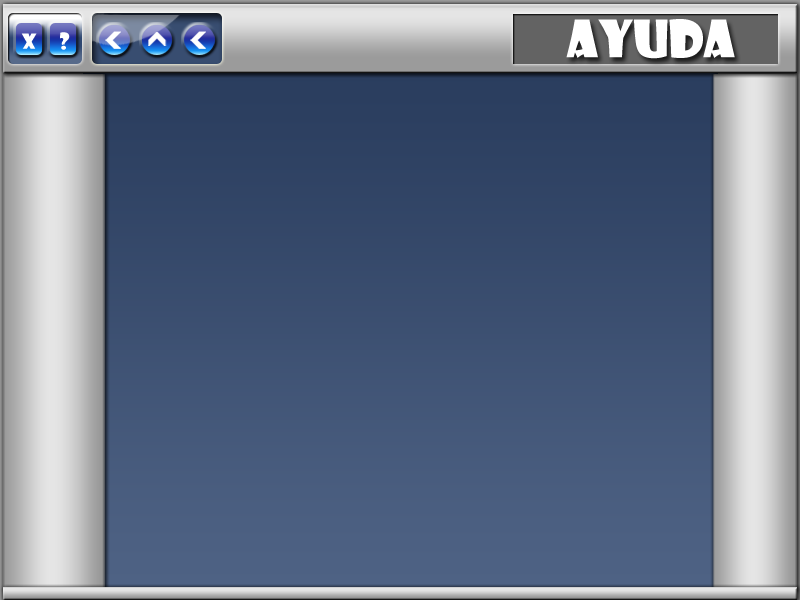
<style>
.page{position:relative;width:800px;height:600px}
.page>*{position:absolute;margin:0}
.t1{font:50.2px "ShowcardGothic-Reg";color:#ffffff}
.t2{font:20.2px "ShowcardGothic-Reg";color:#ffffff}
.t3{font:22.1px "ShowcardGothic-Reg";color:#ffffff}
</style>
<div class="page">
<p class="t1" style="left:566px;top:19px;width:169px;height:40px">AYUDA</p>
<p class="t2" style="left:21px;top:33px;width:16px;height:16px">x</p>
<p class="t3" style="left:60px;top:32px;width:10px;height:18px">?</p>
</div>
